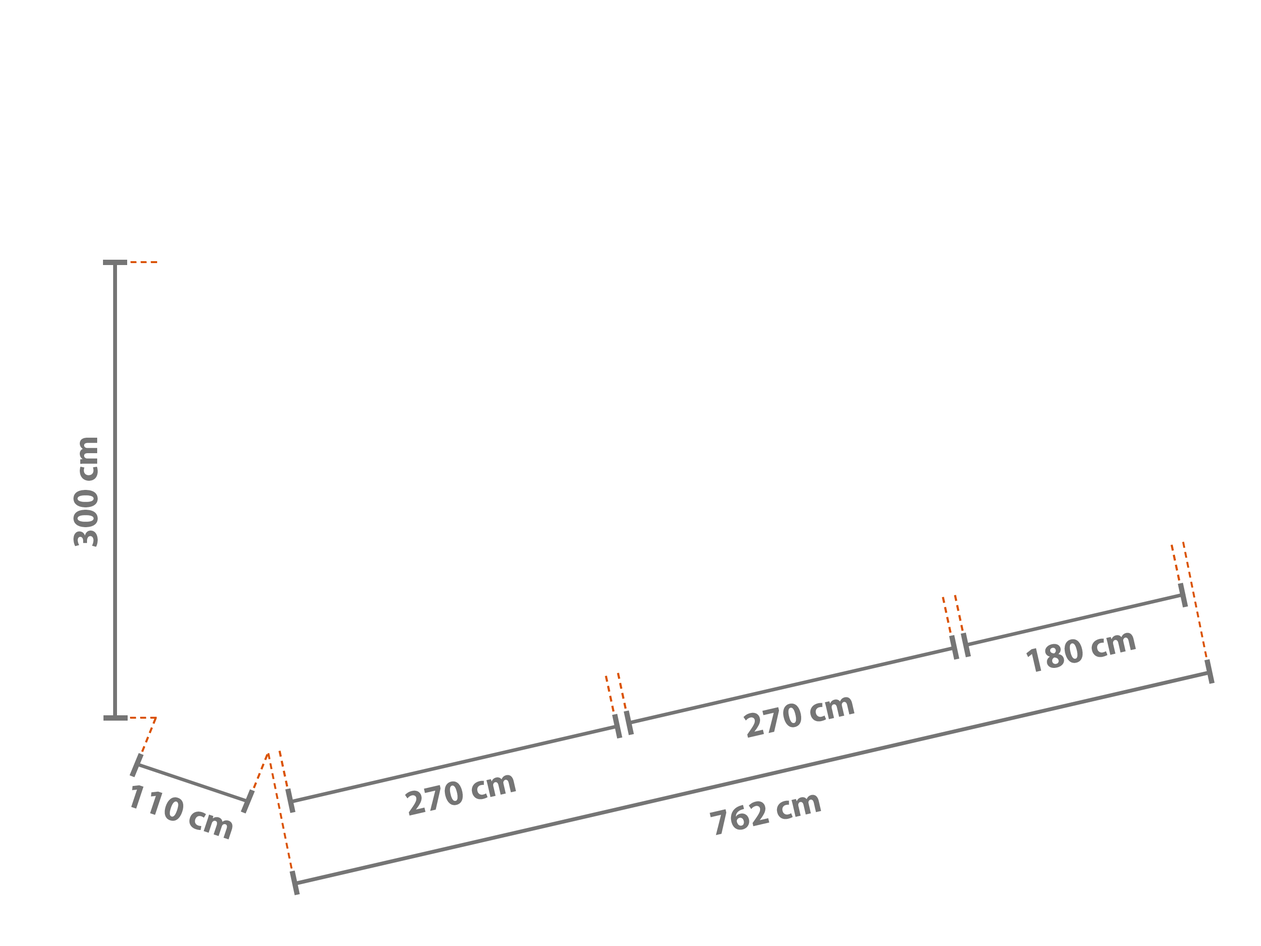
<style>
.page{position:relative;width:1261px;height:946px;background:#ffffff}
.page>*{position:absolute;margin:0}
.t1{font:35.5px "MyriadPro-Bold";color:#757575}
</style>
<div class="page">
<p class="t1" style="left:73px;top:438px;width:25px;height:109px;rotate:-90deg">300 cm</p>
<p class="t1" style="left:1026px;top:632px;width:110px;height:40px;rotate:-13deg">180 cm</p>
<p class="t1" style="left:743px;top:697px;width:112px;height:41px;rotate:-13deg">270 cm</p>
<p class="t1" style="left:131px;top:785px;width:102px;height:54px;text-align:center;rotate:18deg">110 cm<br> cm</p>
<p class="t1" style="left:405px;top:775px;width:111px;height:41px;rotate:-13deg">270 cm</p>
<p class="t1" style="left:709px;top:794px;width:112px;height:41px;rotate:-13deg">762 cm</p>
</div>
